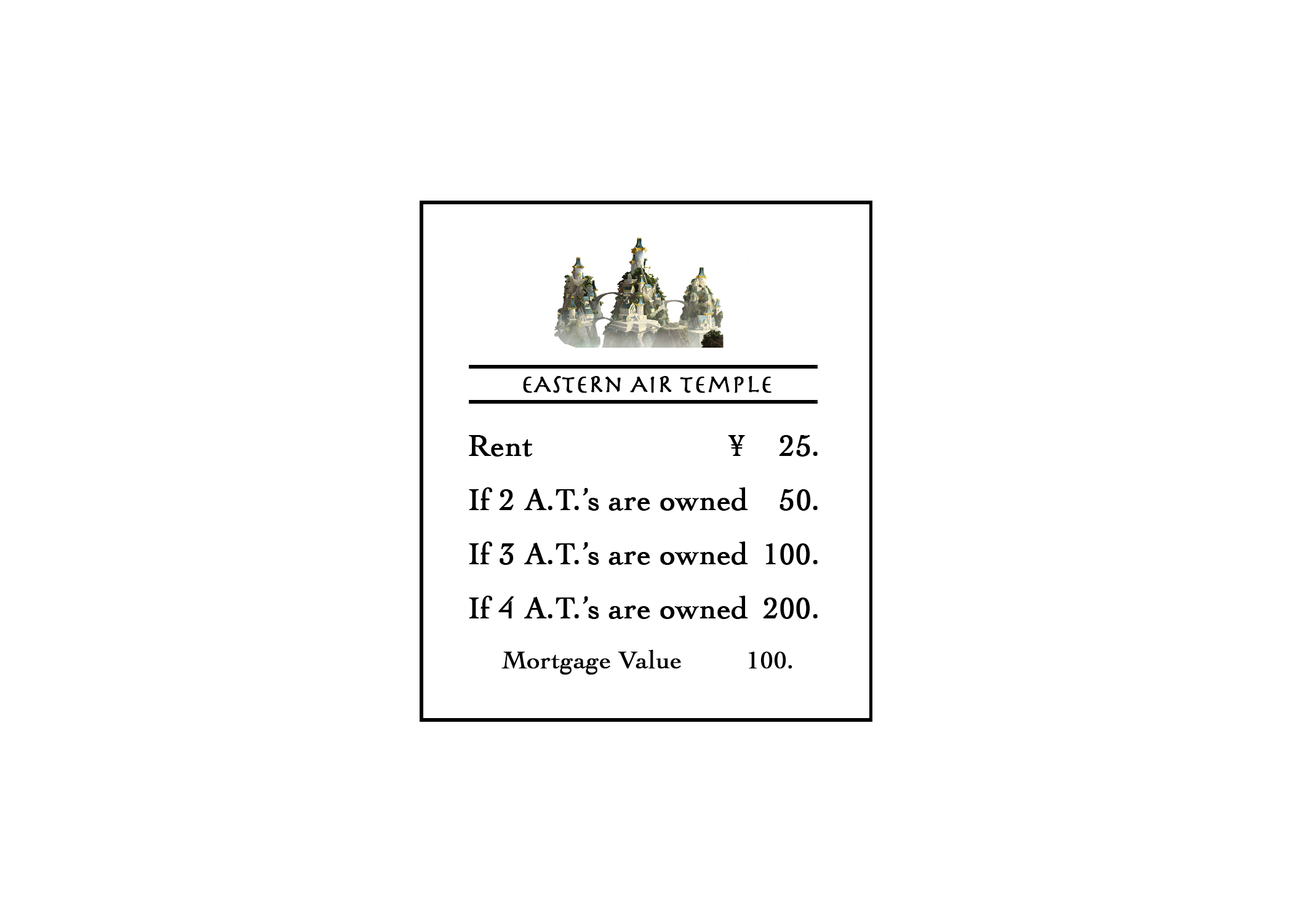
<style>
.page{position:relative;width:1292px;height:923px;background:#ffffff}
.page>*{position:absolute;margin:0}
.t1{font:25.6px "Herculanum";color:#000000;font-weight:bold}
.t2{font:30.8px "Cochin";color:#000000;font-weight:bold}
.t3{font:25.6px "Cochin";color:#000000;font-weight:bold}
</style>
<div class="page">
<p class="t1" style="left:523px;top:376px;width:249px;height:17px">eAsteRn AiR temple</p>
<p class="t2" style="left:469px;top:435px;width:349px;height:22px">Rent                       ¥    25.</p>
<p class="t2" style="left:469px;top:487px;width:349px;height:24px">If 2 A.T.’s are owned    50.</p>
<p class="t2" style="left:469px;top:541px;width:349px;height:24px">If 3 A.T.’s are owned 100.</p>
<p class="t2" style="left:469px;top:596px;width:349px;height:23px">If 4 A.T.’s are owned 200.</p>
<p class="t3" style="left:501px;top:650px;width:291px;height:25px">Mortgage Value         100.</p>
</div>
